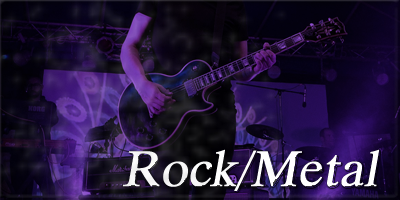
<style>
.page{position:relative;width:400px;height:200px}
.page>*{position:absolute;margin:0}
.t1{font:50px "Dutch801BT-Roman";letter-spacing:-0.025em;color:#ffffff;font-weight:bold;font-style:italic}
</style>
<div class="page">
<p class="t1" style="left:123px;top:149px;width:257px;height:42px">Rock/Metal</p>
</div>
